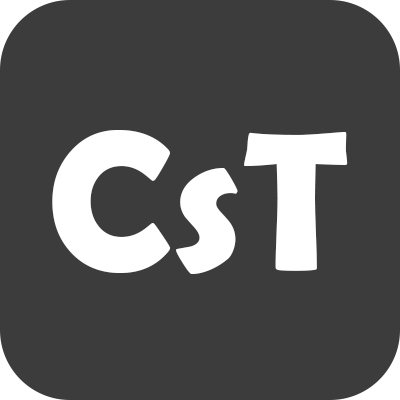
<style>
.page{position:relative;width:400px;height:400px;background:#3c3c3c}
.page>*{position:absolute;margin:0}
.t1{font:200px "BerlinSansFBDemi-Bold";color:#ffffff}
</style>
<div class="page">
<p class="t1" style="left:52px;top:130px;width:296px;height:144px">CsT</p>
</div>
